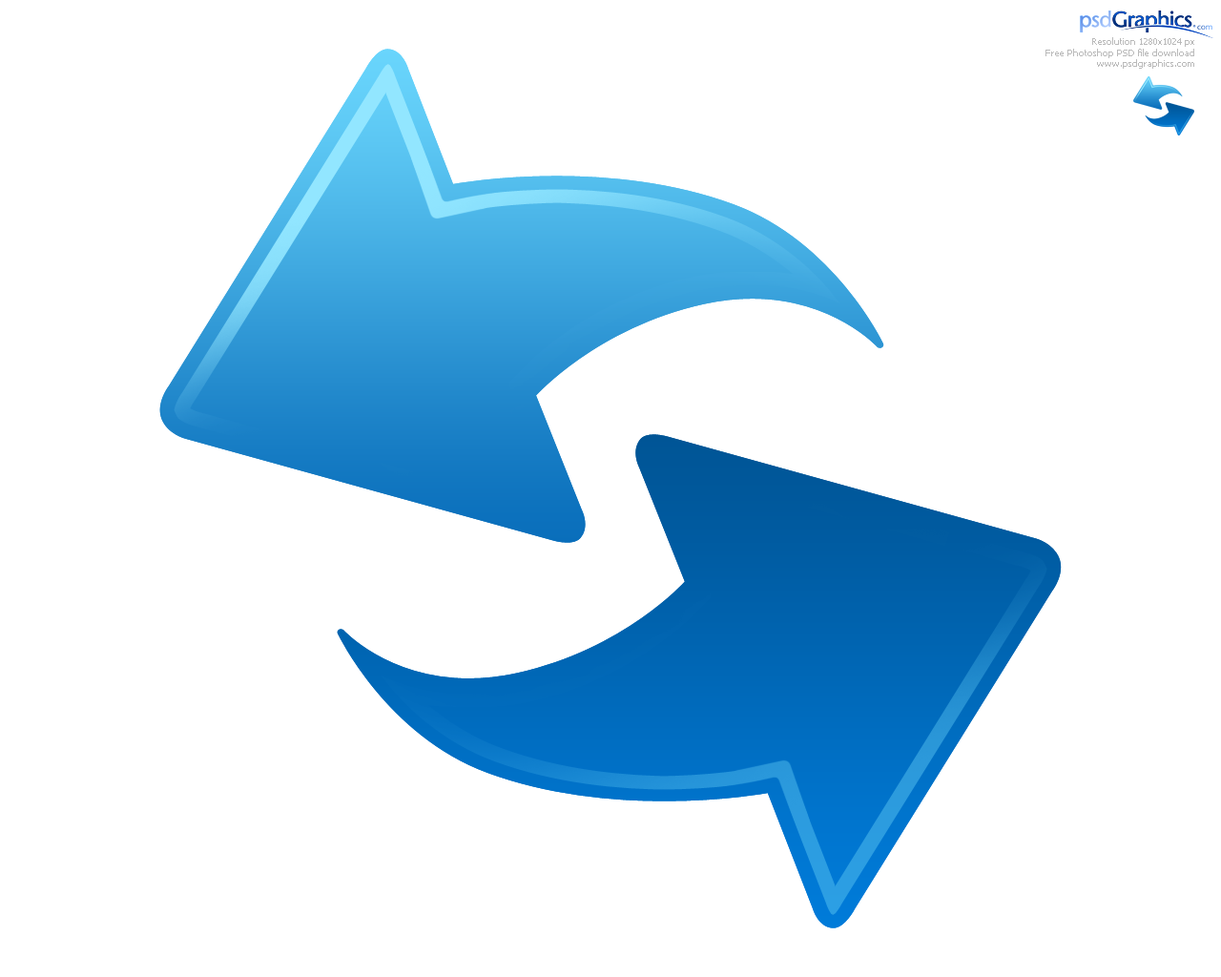
<style>
.page{position:relative;width:1221px;height:977px;background:#ffffff}
.page>*{position:absolute;margin:0}
.t1{font:9.3px "Tahoma";color:#bababa}
</style>
<div class="page">
<p class="t1" style="left:1045px;top:37px;width:149px;height:32px;text-align:right">Resolution 1280x1024 px<br>Free Photoshop PSD file download<br>www.psdgraphics.com</p>
</div>
